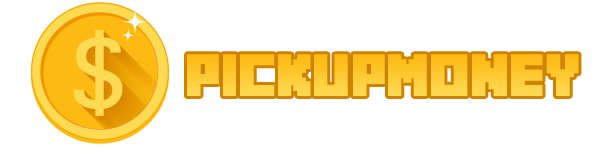
<style>
.page{position:relative;width:600px;height:150px;background:#ffffff}
.page>*{position:absolute;margin:0}
.t1{font:53.3px "Minecrafter"}
</style>
<div class="page">
<p class="t1" style="left:187px;top:54px;width:392px;height:42px">PickupMoney</p>
</div>
